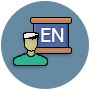
<style>
.page{position:relative;width:90px;height:90px;background:#678aa3}
.page>*{position:absolute;margin:0}
.t1{font:20px "Aveden";color:#ffffff}
</style>
<div class="page">
<p class="t1" style="left:41px;top:28px;width:23px;height:14px">EN</p>
</div>
